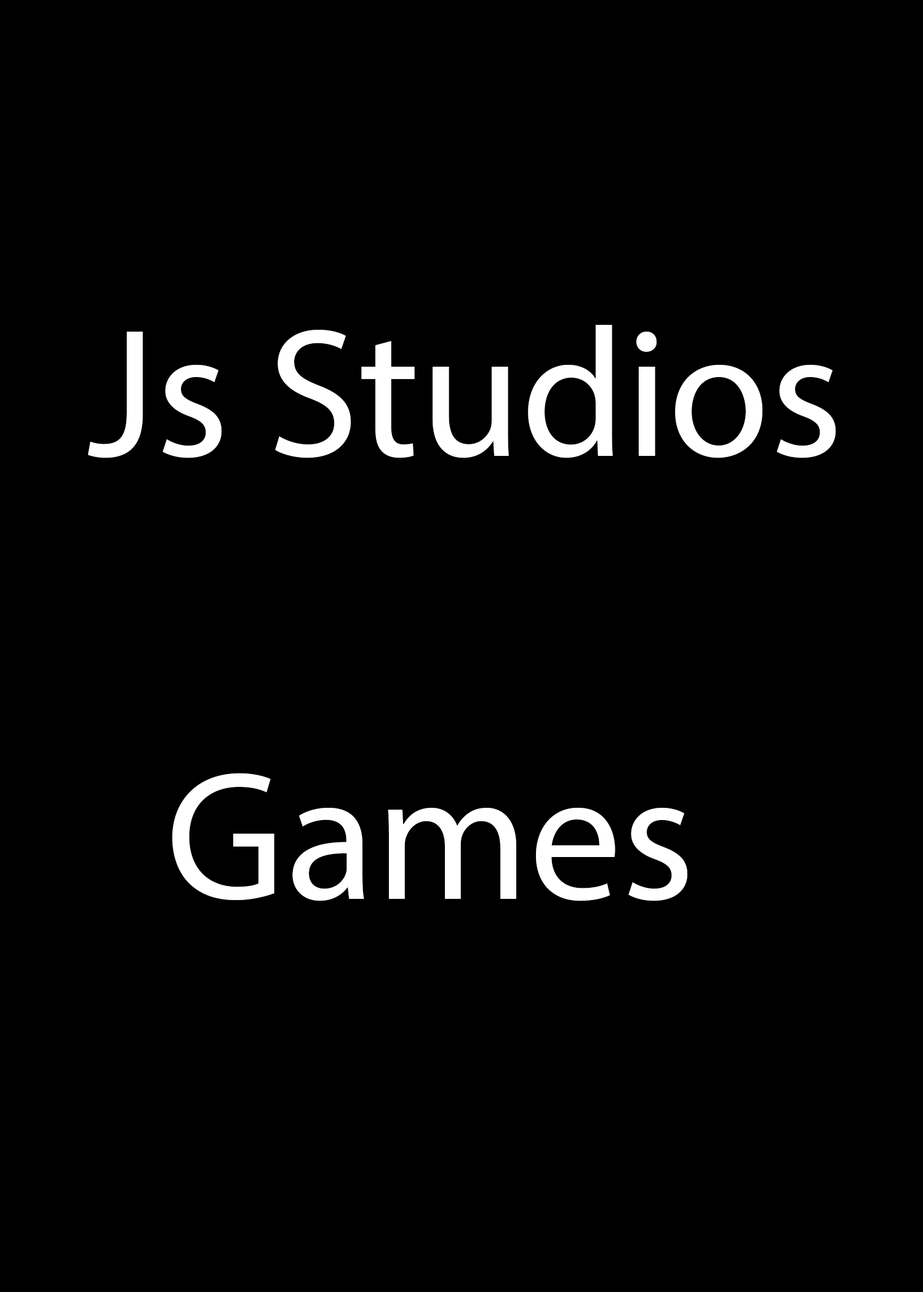
<style>
.page{position:relative;width:923px;height:1292px;background:#000000}
.page>*{position:absolute;margin:0}
.t1{font:184.6px "MyriadPro-Regular";color:#ffffff}
</style>
<div class="page">
<p class="t1" style="left:88px;top:325px;width:748px;height:576px">Js Studios<br><br>  Games</p>
</div>
